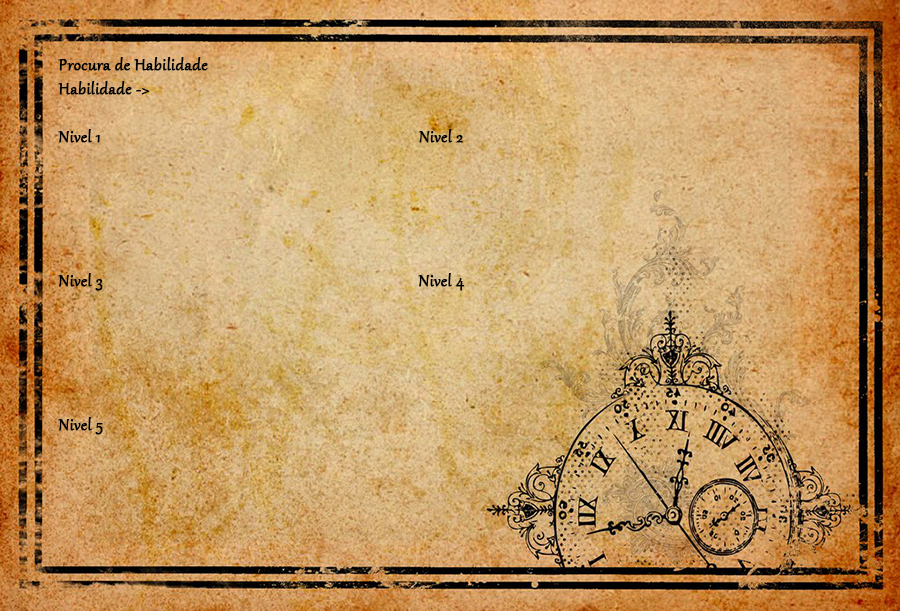
<style>
.page{position:relative;width:900px;height:611px}
.page>*{position:absolute;margin:0}
.t1{font:20px "Gabriola";color:#000000;font-weight:bold}
</style>
<div class="page">
<p class="t1" style="left:58px;top:57px;width:407px;height:378px">Procura de Habilidade<br>Habilidade -&gt;     <br><br>Nivel 1                  Nivel 2<br><br><br><br><br><br>Nivel 3          Nivel 4<br><br><br><br><br><br>Nivel 5</p>
</div>
